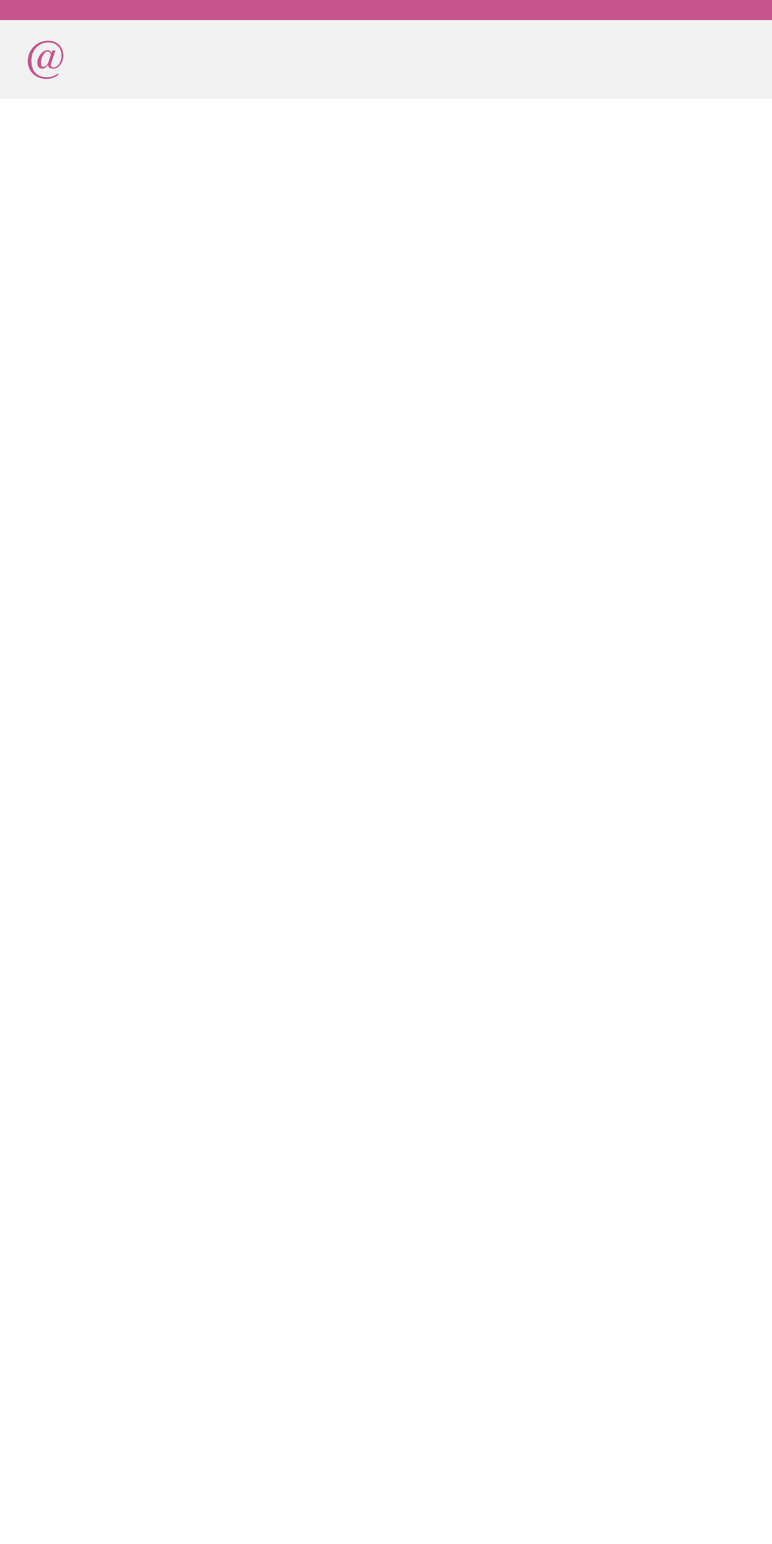
<style>
.page{position:relative;width:772px;height:1544px;background:#ffffff}
.page>*{position:absolute;margin:0}
.t1{font:46.3px "Georgia";letter-spacing:-0.01em;color:#c6538c}
</style>
<div class="page">
<p class="t1" style="left:28px;top:40px;width:35px;height:40px">@</p>
</div>
